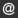
<style>
.page{position:relative;width:18px;height:18px;background:#333333}
.page>*{position:absolute;margin:0}
.t1{font:12.5px "ArialMT";color:#ffffff}
</style>
<div class="page">
<p class="t1" style="left:2px;top:2px;width:13px;height:13px">@</p>
</div>
